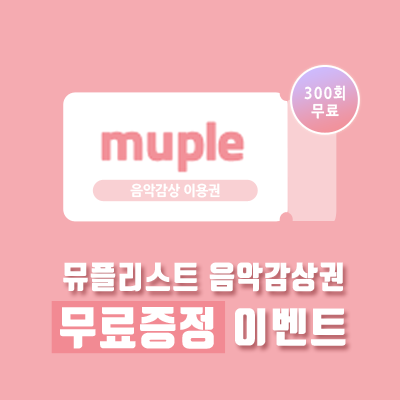
<style>
.page{position:relative;width:400px;height:400px;background:#f5abb1}
.page>*{position:absolute;margin:0}
.t1{font:15.6px/18px "NanumGothicExtraBold";letter-spacing:0.09em;color:#ffffff;scale:0.9 1}
.t2{font:14.2px "NanumGothicExtraBold";letter-spacing:-0.03em;color:#ffffff;scale:0.96 1}
.t3{font:31px "TmonMonsoriBlack";letter-spacing:0.058em;color:#ffffff;scale:0.92 1}
.t4{font:45px "TmonMonsoriBlack";letter-spacing:0.058em;color:#ffffff;scale:0.92 1}
.t5{font:40.7px "TmonMonsoriBlack";letter-spacing:0.058em;color:#ffffff}
</style>
<div class="page">
<p class="t1" style="left:304px;top:85px;width:41px;height:34px;text-align:center">300회<br>무료</p>
<p class="t2" style="left:130px;top:183px;width:90px;height:15px">음악감상 이용권</p>
<p class="t3" style="left:63px;top:262px;width:280px;height:30px">뮤플리스트 음악감상권</p>
<p class="t4" style="left:60px;top:307px;width:154px;height:42px">무료증정</p>
<p class="t5" style="left:235px;top:308px;width:111px;height:38px">이벤트</p>
</div>
